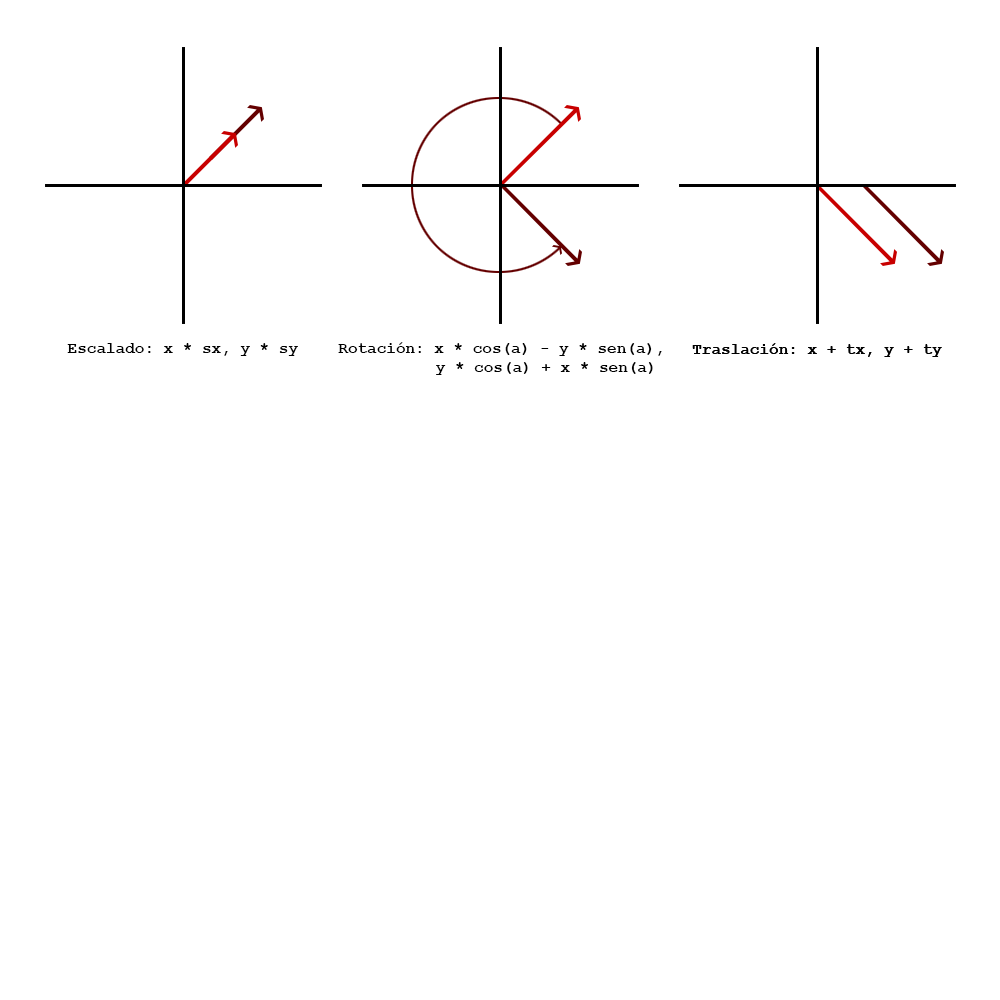
<style>
.page{position:relative;width:1000px;height:1000px;background:#ffffff}
.page>*{position:absolute;margin:0}
.t1{font:16px "CourierNewPS-BoldMT";color:#000000}
</style>
<div class="page">
<p class="t1" style="left:338px;top:342px;width:324px;height:33px;text-align:right">Rotación: x * cos(a) - y * sen(a), <br>y * cos(a) + x * sen(a)</p>
<p class="t1" style="left:67px;top:343px;width:231px;height:13px">Escalado: x * sx, y * sy</p>
<p class="t1" style="left:692px;top:343px;width:250px;height:14px">Traslación: x + tx, y + ty</p>
<p class="t1" style="left:692px;top:343px;width:250px;height:14px">Traslación: x + tx, y + ty</p>
</div>
